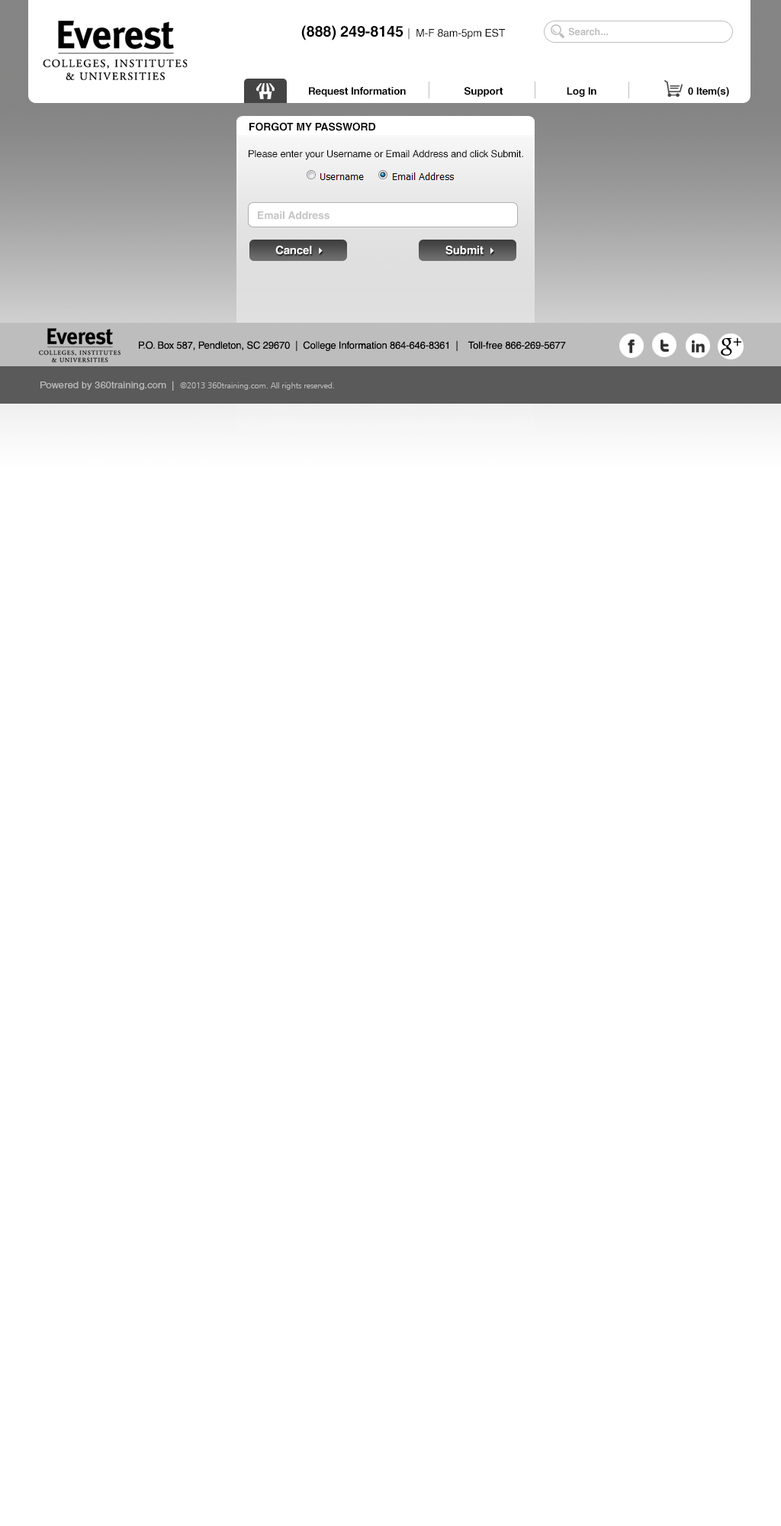
<style>
.page{position:relative;width:781px;height:1526px;background:#ffffff}
.page>*{position:absolute;margin:0}
.t1{font:10.7px "Helvetica";letter-spacing:-0.01em;color:#000000}
.t2{font:15.3px "Helvetica-Bold";letter-spacing:-0.01em;color:#000000}
.t3{font:9.9px "Helvetica-Bold";letter-spacing:-0.01em;color:#bebebe}
.t4{font:10.3px "Helvetica-Bold";letter-spacing:-0.01em;color:#000000}
.t5{font:10.7px "Helvetica-Bold";letter-spacing:-0.01em;color:#000000}
.t6{font:9.9px "Helvetica";letter-spacing:-0.01em;color:#000000}
.t7{font:10.7px "Helvetica-Bold";letter-spacing:-0.01em;color:#c5c5c5}
.t8{font:11.4px "Helvetica-Bold";letter-spacing:-0.01em;color:#ffffff}
.t9{font:9.2px "Wingdings3";letter-spacing:-0.01em;color:#ffffff}
.t10{font:8.4px "Humanist777BT-LightB";letter-spacing:-0.01em;color:#b9b9b9}
.t11{font:9.2px "Helvetica";color:#b9b9b9;scale:1.1 1}
</style>
<div class="page">
<p class="t1" style="left:301px;top:25px;width:205px;height:15px"><span class="t2">(888) 249-8145 </span>|  M-F 8am-5pm EST</p>
<p class="t3" style="left:568px;top:27px;width:40px;height:9px">Search...</p>
<p class="t4" style="left:309px;top:87px;width:420px;height:10px">Request Information                     Support                       Log In                                 0 Item(s)</p>
<p class="t5" style="left:250px;top:122px;width:126px;height:9px">FORGOT MY PASSWORD</p>
<p class="t6" style="left:249px;top:150px;width:274px;height:9px">Please enter your Username or Email Address and click Submit.</p>
<p class="t7" style="left:258px;top:211px;width:72px;height:9px">Email Address</p>
<p class="t8" style="left:275px;top:246px;width:48px;height:9px">Cancel  <span class="t9">}</span></p>
<p class="t8" style="left:446px;top:246px;width:48px;height:9px">Submit  <span class="t9">}</span></p>
<p class="t6" style="left:139px;top:340px;width:427px;height:11px">P.O. Box 587, Pendleton, SC 29670  |  College Information 864-646-8361  |    Toll-free 866-269-5677</p>
<p class="t10" style="left:40px;top:381px;width:294px;height:10px"><span class="t11">Powered by 360training.com  |  </span>©2013 360training.com. All rights reserved.</p>
</div>
